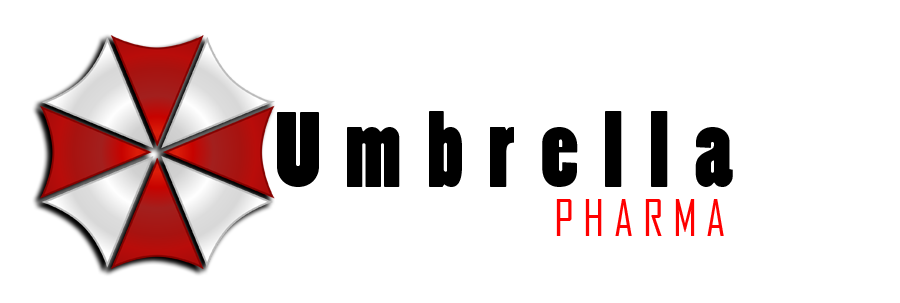
<style>
.page{position:relative;width:900px;height:303px;background:#ffffff}
.page>*{position:absolute;margin:0}
.t1{font:100px "PoplarStd";letter-spacing:0.25em;color:#000000}
.t2{font:48px "AgencyFB-Reg";letter-spacing:0.2em;color:#ff0000}
</style>
<div class="page">
<p class="t1" style="left:277px;top:111px;width:456px;height:76px">Umbrella</p>
<p class="t2" style="left:556px;top:199px;width:168px;height:37px">PHARMA</p>
</div>
